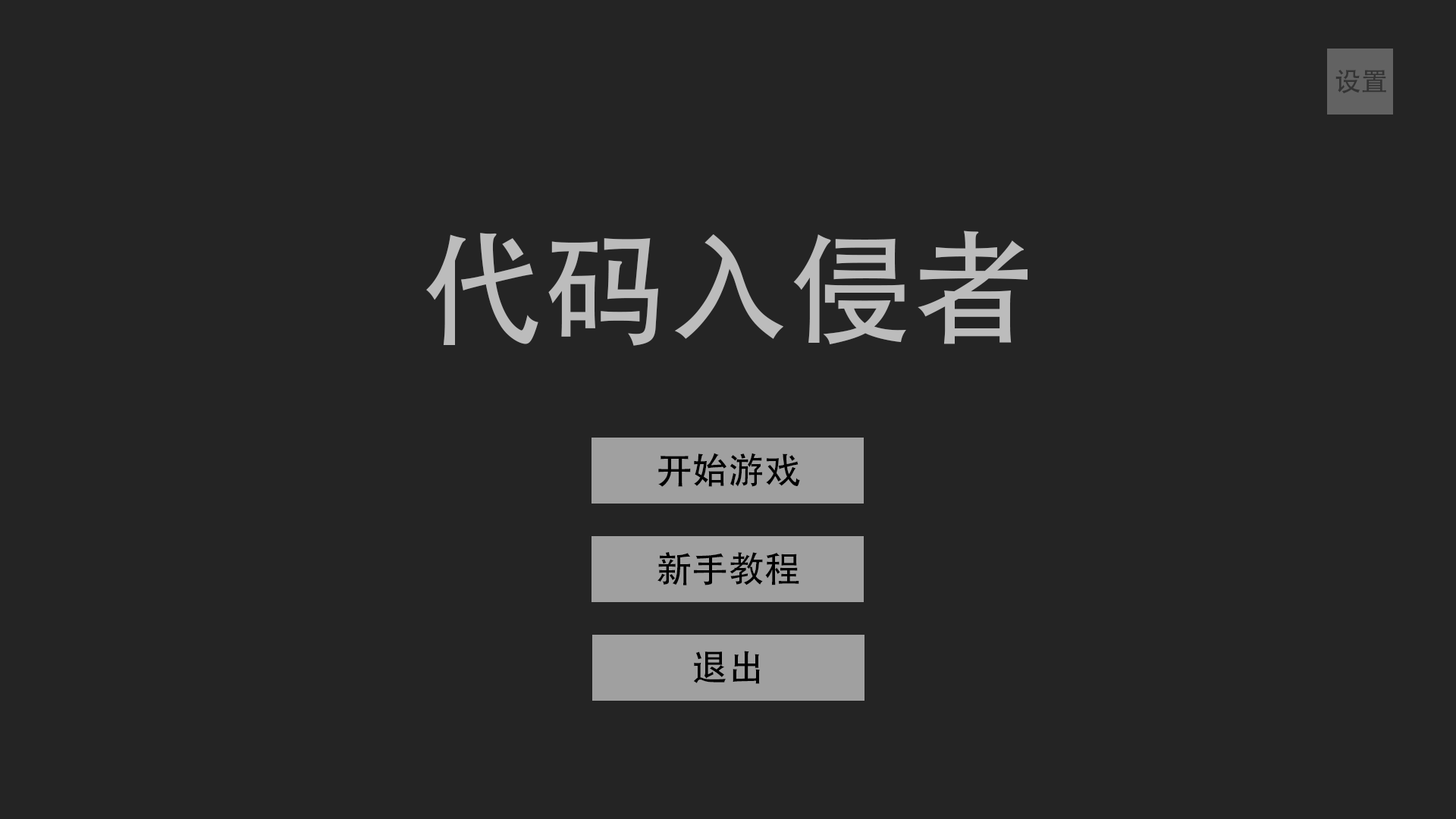
<style>
.page{position:relative;width:1456px;height:819px;background:#242424}
.page>*{position:absolute;margin:0}
.t1{font:26.4px "AdobeHeitiStd-Regular";color:#343434}
.t2{font:122.7px "AdobeHeitiStd-Regular";color:#bcbcbc}
.t3{font:36.3px "AdobeHeitiStd-Regular";color:#000000}
</style>
<div class="page">
<p class="t1" style="left:1335px;top:70px;width:51px;height:23px">设置</p>
<p class="t2" style="left:426px;top:231px;width:602px;height:115px">代码入侵者</p>
<p class="t3" style="left:658px;top:453px;width:142px;height:34px">开始游戏</p>
<p class="t3" style="left:657px;top:552px;width:142px;height:33px">新手教程</p>
<p class="t3" style="left:693px;top:651px;width:67px;height:33px">退出</p>
</div>
